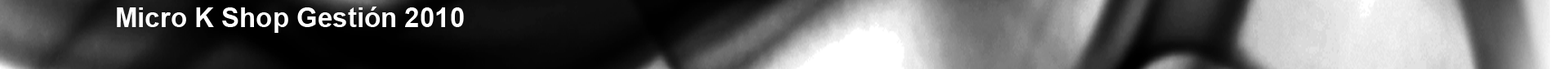
<style>
.page{position:relative;width:1568px;height:69px}
.page>*{position:absolute;margin:0}
.t1{font:27px "Arial-BoldMT";color:#ffffff}
.t2{font:27px "Arial-BoldMT";color:#ff0006}
</style>
<div class="page">
<p class="t1" style="left:117px;top:7px;width:347px;height:26px">Micro K Shop Gestión 2<span class="t2">0</span>10</p>
</div>
